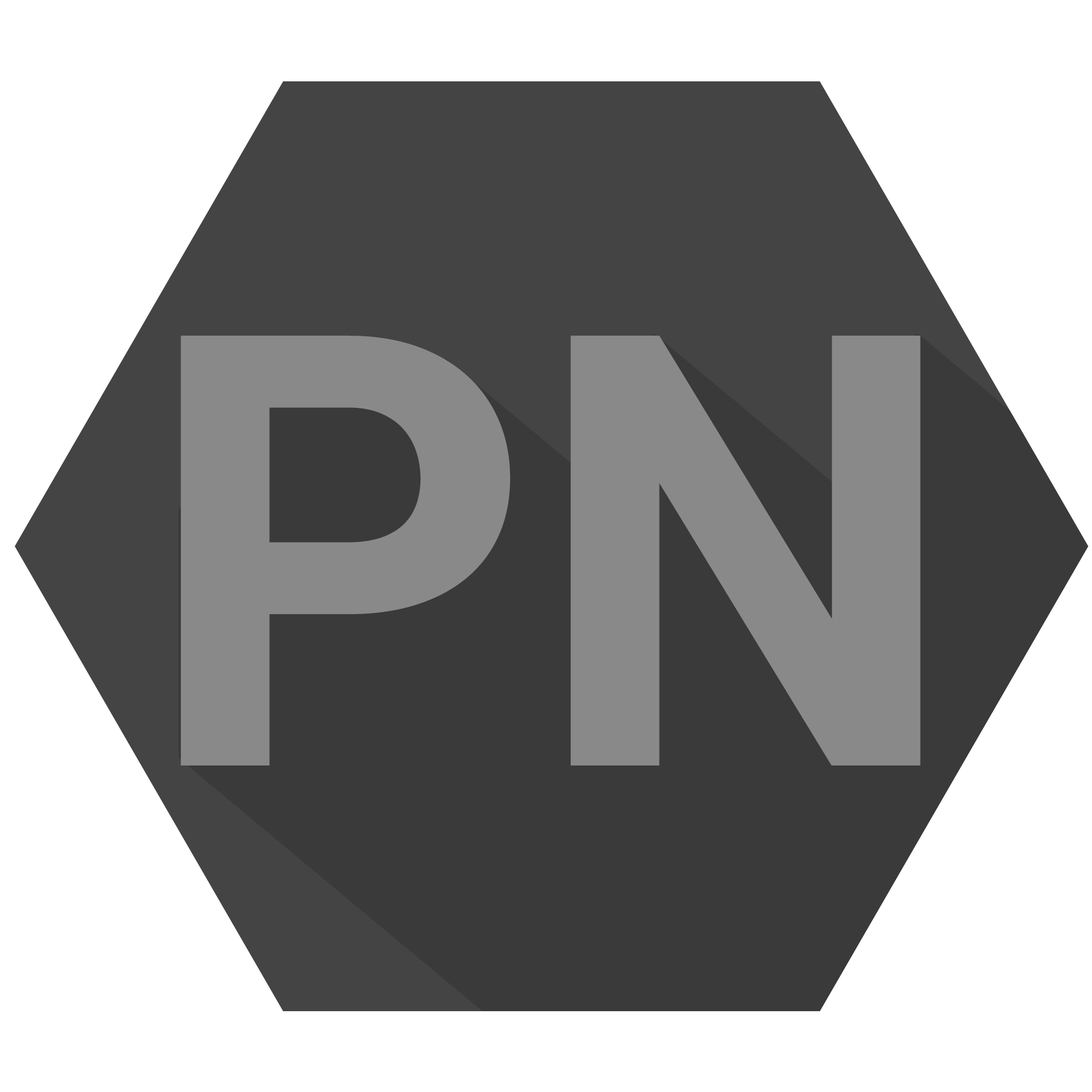
<style>
.page{position:relative;width:1092px;height:1092px;background:#ffffff}
.page>*{position:absolute;margin:0}
.t1{font:604.4px "Roboto-Bold";color:#898989}
</style>
<div class="page">
<p class="t1" style="left:181px;top:335px;width:740px;height:430px">PN</p>
</div>
